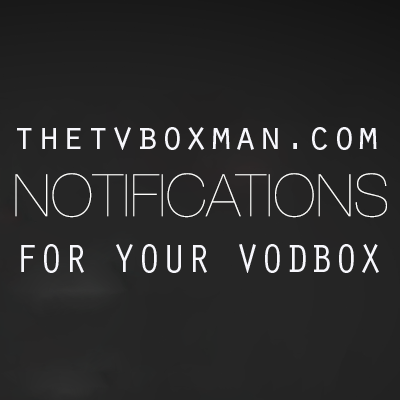
<style>
.page{position:relative;width:400px;height:400px}
.page>*{position:absolute;margin:0}
.t1{font:41px "OratorStd";color:#f7f7fc}
</style>
<div class="page">
<p class="t1" style="left:17px;top:127px;width:360px;height:23px">thetvboxman.com</p>
<p class="t1" style="left:21px;top:244px;width:358px;height:29px">FOR YOUR VODBOX</p>
</div>
